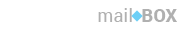
<style>
.page{position:relative;width:177px;height:31px;background:#ffffff}
.page>*{position:absolute;margin:0}
.t1{font:18px "Roboto-Regular";color:#afafaf}
.t2{font:18px "Roboto-Black";color:#afafaf}
</style>
<div class="page">
<p class="t1" style="left:98px;top:8px;width:79px;height:14px">mail  <span class="t2">BOX</span></p>
</div>
